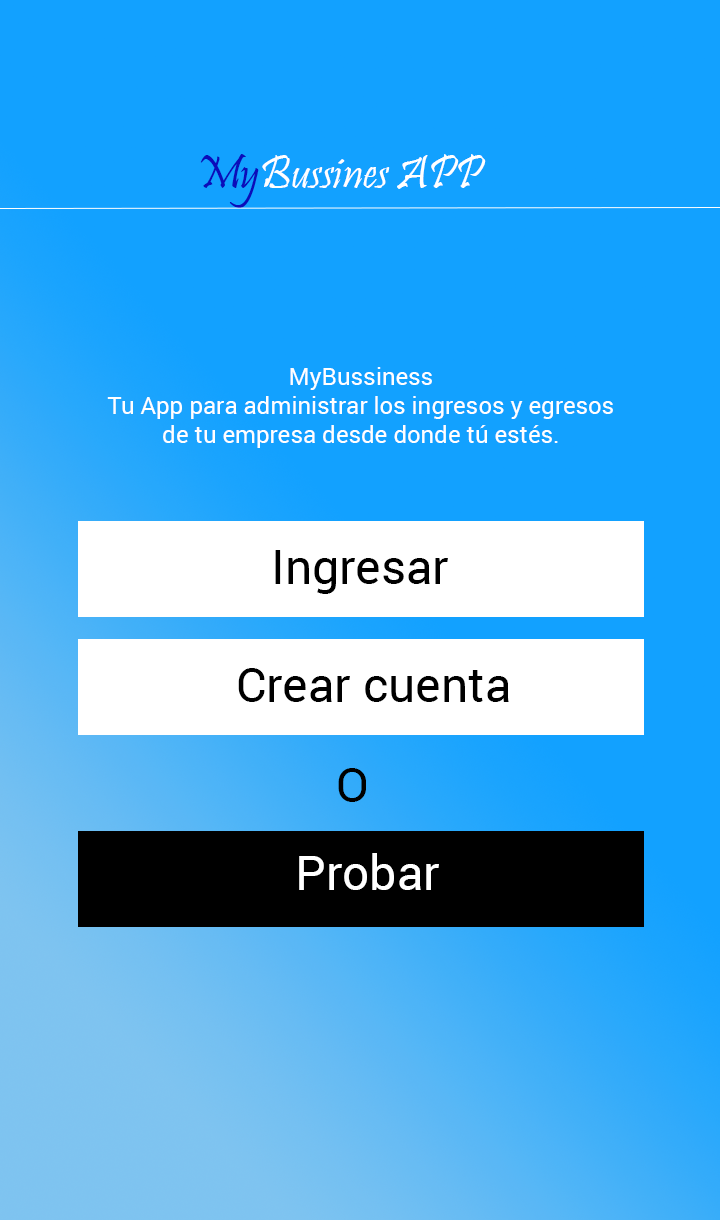
<style>
.page{position:relative;width:720px;height:1220px;background:#12a1ff}
.page>*{position:absolute;margin:0}
.t1{font:48px "Pristina-Regular";color:#ffffff}
.t2{font:48px "Pristina-Regular";color:#0c0cba}
.t3{font:24px "Roboto-Regular";color:#ffffff}
.t4{font:48px "Roboto-Regular";color:#000000}
.t5{font:48px "Roboto-Regular";color:#ffffff}
</style>
<div class="page">
<p class="t1" style="left:200px;top:154px;width:286px;height:54px"><span class="t2">My</span>Bussines APP</p>
<p class="t3" style="left:107px;top:367px;width:506px;height:81px;text-align:center">MyBussiness<br>Tu App para administrar los ingresos y egresos<br>de tu empresa desde donde tú estés.</p>
<p class="t4" style="left:275px;top:550px;width:173px;height:44px">Ingresar</p>
<p class="t4" style="left:238px;top:668px;width:271px;height:34px">Crear cuenta</p>
<p class="t4" style="left:338px;top:768px;width:28px;height:34px">O</p>
<p class="t5" style="left:299px;top:853px;width:140px;height:37px">Probar</p>
</div>
